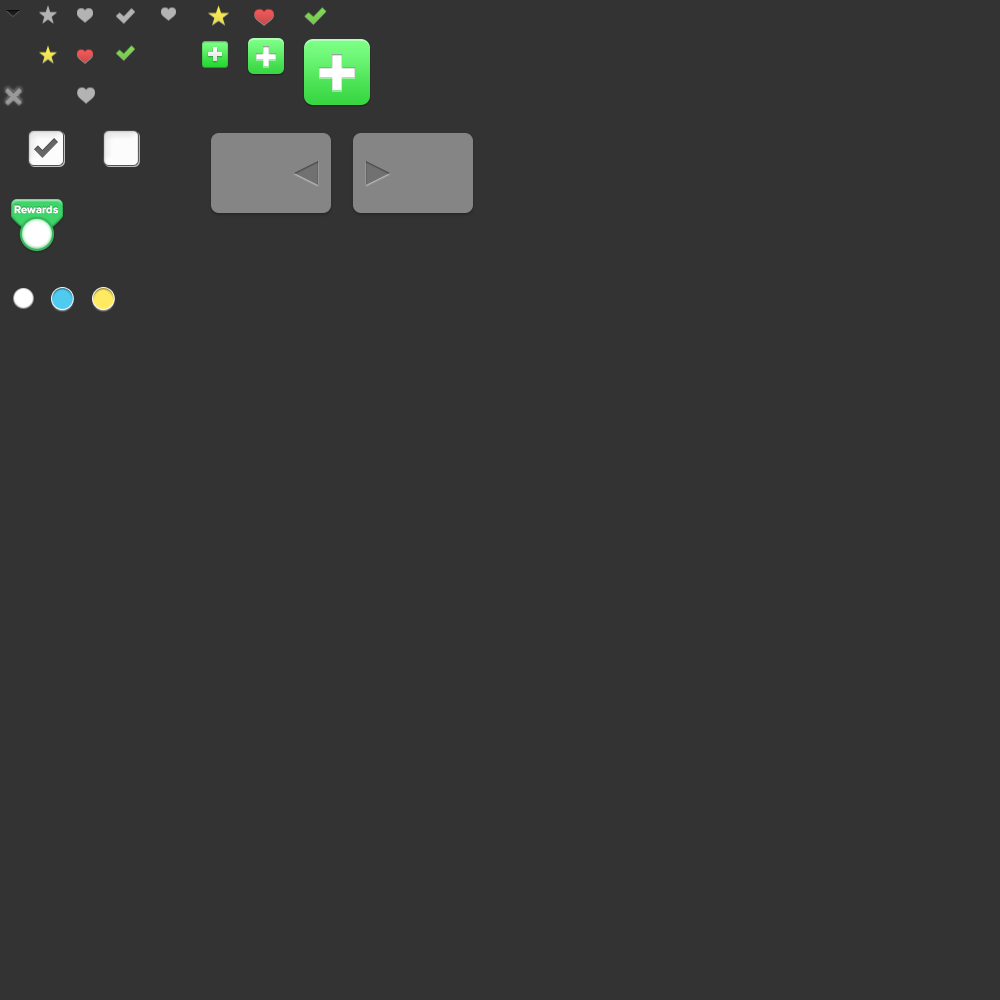
<style>
.page{position:relative;width:1000px;height:1000px;background:#333333}
.page>*{position:absolute;margin:0}
.t1{font:11px "ProximaNovaBold";letter-spacing:0.01em;color:#ffffff}
</style>
<div class="page">
<p class="t1" style="left:14px;top:205px;width:45px;height:9px">Rewards</p>
</div>
